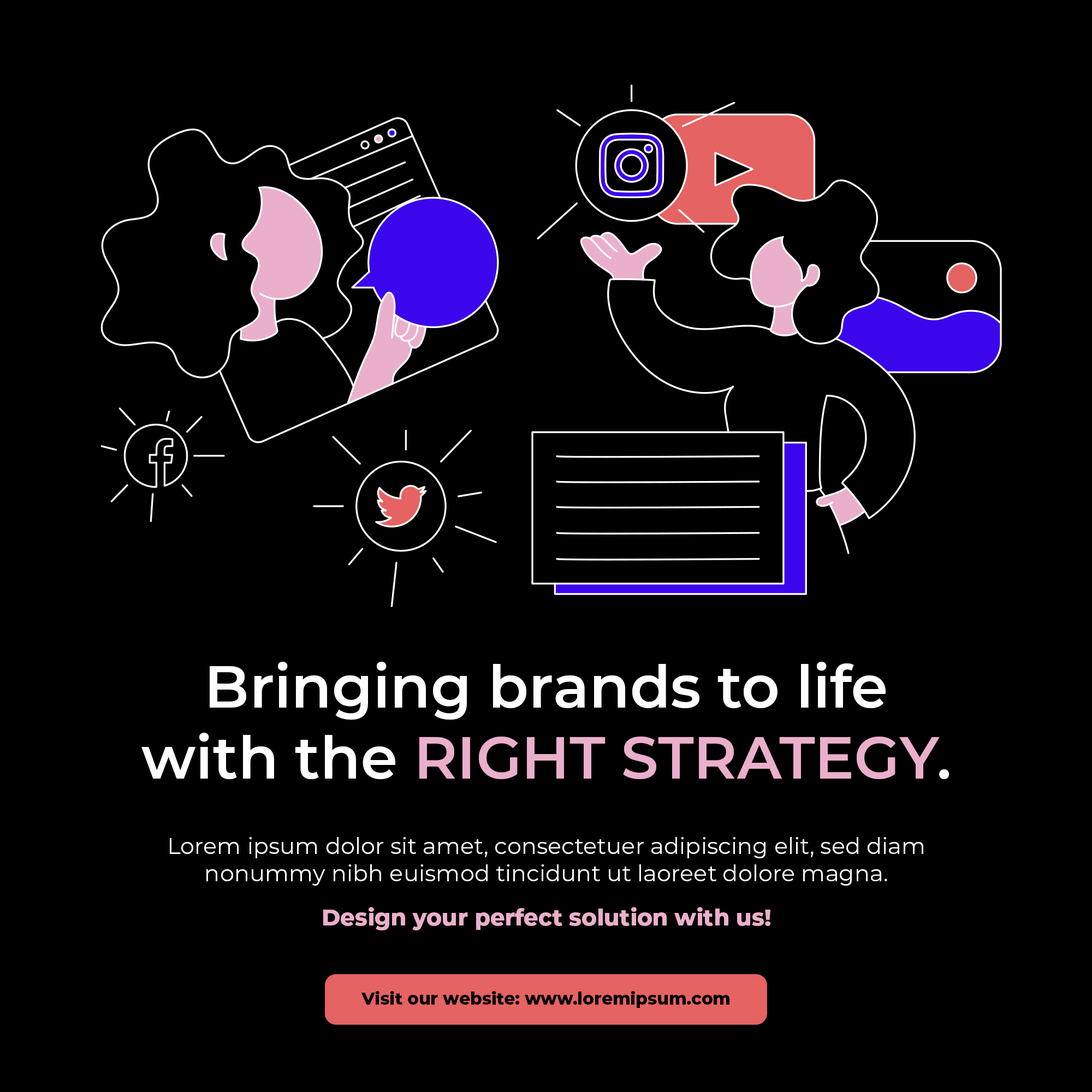
<style>
.page{position:relative;width:1092px;height:1092px;background:#000000}
.page>*{position:absolute;margin:0}
.t1{font:59.1px "Montserrat-SemiBold";color:#ffffff}
.t2{font:59.1px "Montserrat-SemiBold";color:#eaafcb}
.t3{font:22.7px "Montserrat-Regular";color:#ffffff}
.t4{font:22.7px "Montserrat-ExtraBold";color:#eaafcb}
.t5{font:17.1px "Montserrat-ExtraBold";color:#000000}
</style>
<div class="page">
<p class="t1" style="left:141px;top:662px;width:808px;height:118px;text-align:center">Bringing brands to life<br>with the <span class="t2">RIGHT STRATEGY</span>.</p>
<p class="t3" style="left:170px;top:837px;width:753px;height:49px;text-align:center">Lorem ipsum dolor sit amet, consectetuer adipiscing elit, sed diam nonummy nibh euismod tincidunt ut laoreet dolore magna.</p>
<p class="t4" style="left:323px;top:907px;width:447px;height:23px">Design your perfect solution with us!</p>
<p class="t5" style="left:361px;top:991px;width:368px;height:17px">Visit our website: www.loremipsum.com</p>
</div>
